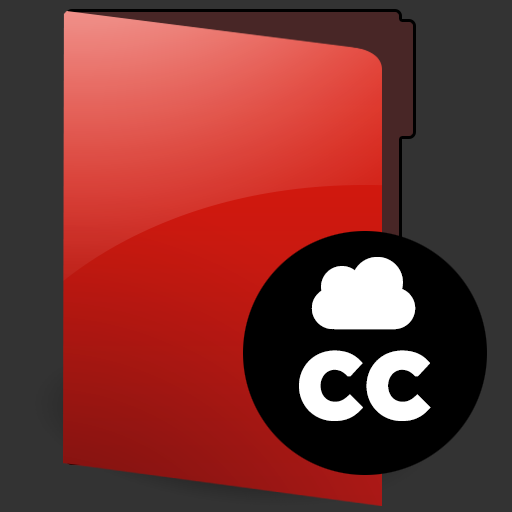
<style>
.page{position:relative;width:512px;height:512px;background:#333333}
.page>*{position:absolute;margin:0}
.t1{font:70px "WebSymbols-Regular";letter-spacing:-0.02em;color:#ffffff;font-weight:bold}
.t2{font:120px "Gotham-Bold";letter-spacing:-0.02em;color:#ffffff;font-weight:bold}
</style>
<div class="page">
<p class="t1" style="left:311px;top:257px;width:105px;height:73px">C</p>
<p class="t2" style="left:299px;top:350px;width:132px;height:71px">cc</p>
</div>
